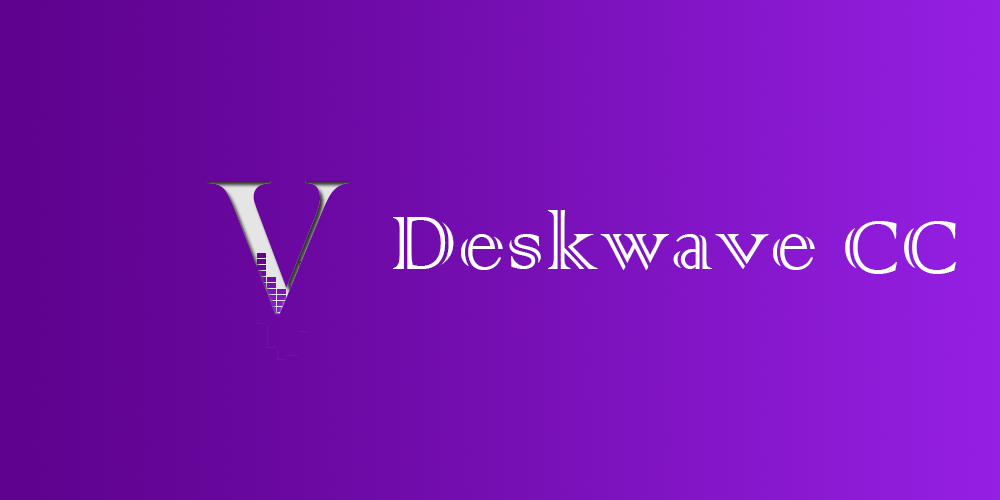
<style>
.page{position:relative;width:1000px;height:500px}
.page>*{position:absolute;margin:0}
.t1{font:100px "ColonnaMT";letter-spacing:0.02em;color:#ffffff}
</style>
<div class="page">
<p class="t1" style="left:393px;top:210px;width:422px;height:60px">Deskwave</p>
<p class="t1" style="left:845px;top:221px;width:111px;height:53px">CC</p>
</div>
